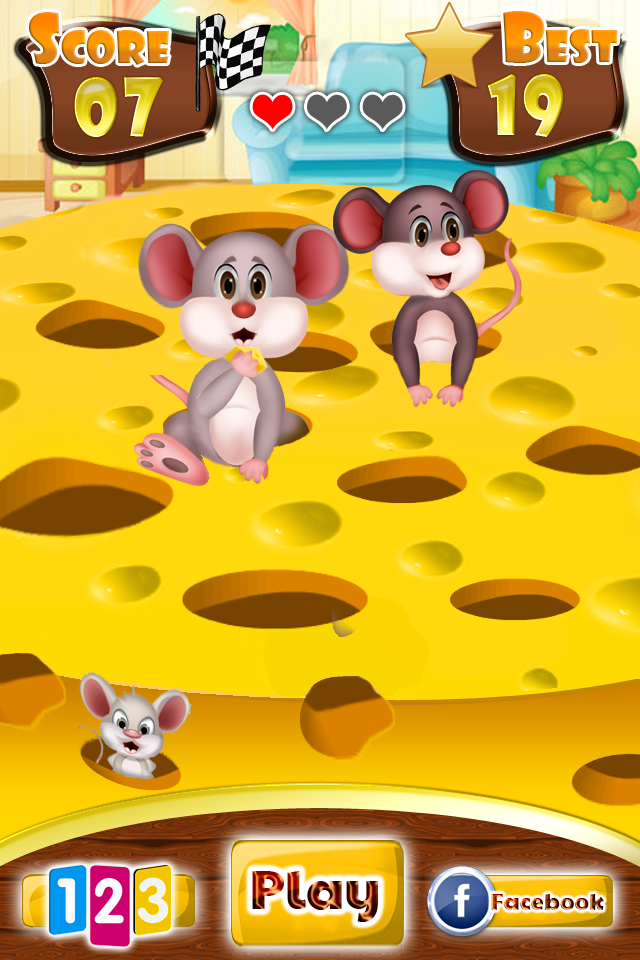
<style>
.page{position:relative;width:640px;height:960px}
.page>*{position:absolute;margin:0}
.t1{font:43px "ShowcardGothic-Reg"}
.t2{font:65px "ShowcardGothic-Reg"}
.t3{font:78px "ShowcardGothic-Reg";letter-spacing:0.04em}
.t4{font:55.3px "PaytoneOne"}
.t5{font:23.3px "PaytoneOne"}
</style>
<div class="page">
<p class="t1" style="left:29px;top:12px;width:140px;height:53px"><span class="t2">S</span>core</p>
<p class="t1" style="left:503px;top:11px;width:115px;height:52px"><span class="t2">B</span>est</p>
<p class="t3" style="left:74px;top:77px;width:90px;height:60px">07</p>
<p class="t3" style="left:487px;top:74px;width:77px;height:63px">19</p>
<p class="t4" style="left:252px;top:871px;width:126px;height:51px">Play</p>
<p class="t5" style="left:491px;top:894px;width:113px;height:16px">Facebook</p>
</div>
